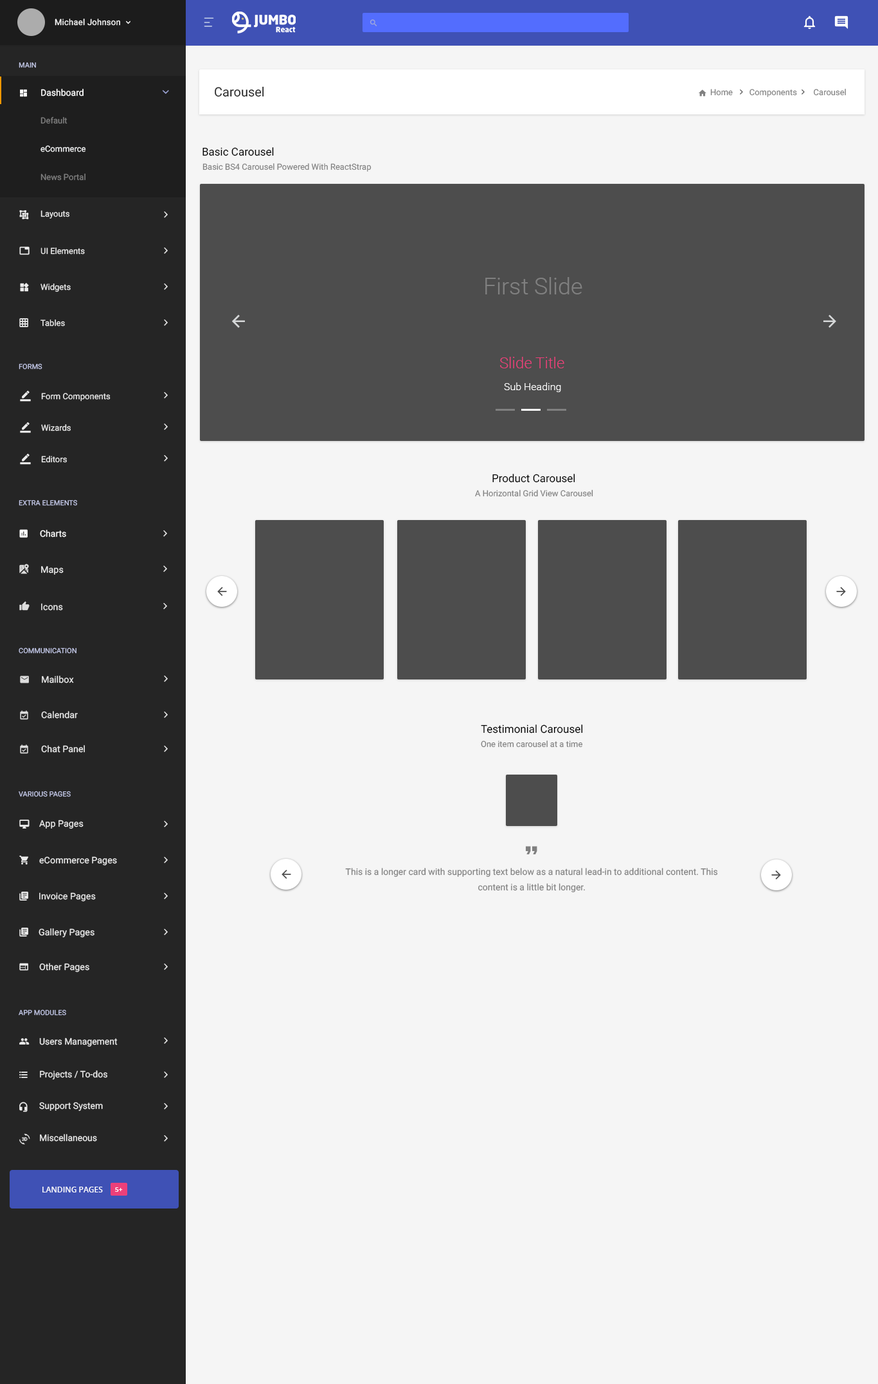
<style>
.page{position:relative;width:878px;height:1384px;background:#f5f5f5}
.page>*{position:absolute;margin:0}
.t1{font:8.4px "Roboto-Regular";letter-spacing:0.02em;color:#fafafa}
.t2{font:7.1px "Roboto-Regular";color:#c5cae9;text-transform:uppercase}
.t3{font:9px "Roboto-Regular";color:#ffffff}
.t4{font:12.9px "Roboto-Regular";color:#252525}
.t5{font:8.4px "Roboto-Regular";color:#808080}
.t6{font:8.4px/28.3px "Roboto-Regular";color:#808080}
.t7{font:8.4px/28.3px "Roboto-Regular";color:#f1f2f3}
.t8{font:10.9px "Roboto-Regular";color:#000000}
.t9{font:8.4px "Roboto-Regular";color:#ebebeb}
.t10{font:23.1px "Roboto-Light";color:#808080}
.t11{font:15.4px "Roboto-Light";color:#ec407a}
.t12{font:10.3px "Roboto-Light";color:#ffffff}
.t13{font:9px "Roboto-Regular";color:#ebebeb}
.t14{font:9px/15.4px "Roboto-Regular";color:#808080}
.t15{font:7.7px "OpenSans-SemiBold";color:#ffffff;text-transform:uppercase}
.t16{font:6.4px "OpenSans-SemiBold";color:#ffffff;text-transform:uppercase}
</style>
<div class="page">
<p class="t1" style="left:55px;top:19px;width:65px;height:7px">Michael Johnson</p>
<p class="t2" style="left:19px;top:62px;width:17px;height:6px">main</p>
<p class="t3" style="left:41px;top:89px;width:43px;height:7px">Dashboard</p>
<p class="t4" style="left:215px;top:86px;width:49px;height:11px">Carousel</p>
<p class="t5" style="left:710px;top:89px;width:136px;height:8px">Home        Components        Carousel</p>
<p class="t6" style="left:41px;top:116px;width:45px;height:65px">Default<br><span class="t7">eCommerce<br></span>News Portal</p>
<p class="t8" style="left:203px;top:147px;width:71px;height:9px">Basic Carousel</p>
<p class="t5" style="left:203px;top:163px;width:169px;height:9px">Basic BS4 Carousel Powered With ReactStrap</p>
<p class="t9" style="left:41px;top:210px;width:28px;height:9px">Layouts</p>
<p class="t9" style="left:41px;top:248px;width:44px;height:7px">UI Elements</p>
<p class="t10" style="left:485px;top:277px;width:97px;height:17px">First Slide</p>
<p class="t9" style="left:41px;top:284px;width:30px;height:8px">Widgets</p>
<p class="t9" style="left:41px;top:320px;width:24px;height:7px">Tables</p>
<p class="t2" style="left:19px;top:363px;width:23px;height:7px">forms</p>
<p class="t11" style="left:500px;top:357px;width:64px;height:11px">Slide Title</p>
<p class="t12" style="left:504px;top:383px;width:57px;height:9px">Sub Heading</p>
<p class="t9" style="left:41px;top:393px;width:70px;height:8px">Form Components</p>
<p class="t9" style="left:41px;top:424px;width:30px;height:7px">Wizards</p>
<p class="t9" style="left:41px;top:456px;width:26px;height:7px">Editors</p>
<p class="t8" style="left:492px;top:474px;width:83px;height:9px">Product Carousel</p>
<p class="t5" style="left:475px;top:490px;width:118px;height:7px">A Horizontal Grid View Carousel</p>
<p class="t2" style="left:19px;top:500px;width:58px;height:6px">extra elements</p>
<p class="t3" style="left:40px;top:530px;width:26px;height:7px">Charts</p>
<p class="t13" style="left:41px;top:566px;width:23px;height:9px">Maps</p>
<p class="t13" style="left:41px;top:603px;width:22px;height:8px">Icons</p>
<p class="t2" style="left:19px;top:647px;width:58px;height:7px">communication</p>
<p class="t13" style="left:42px;top:676px;width:32px;height:7px">Mailbox</p>
<p class="t13" style="left:41px;top:711px;width:37px;height:8px">Calendar</p>
<p class="t8" style="left:481px;top:725px;width:102px;height:9px">Testimonial Carousel</p>
<p class="t13" style="left:41px;top:745px;width:44px;height:8px">Chat Panel</p>
<p class="t5" style="left:481px;top:741px;width:102px;height:7px">One item carousel at a time</p>
<p class="t2" style="left:19px;top:791px;width:52px;height:6px">various pages</p>
<p class="t13" style="left:39px;top:820px;width:45px;height:9px">App Pages</p>
<p class="t13" style="left:39px;top:856px;width:78px;height:10px">eCommerce Pages</p>
<p class="t14" style="left:345px;top:868px;width:373px;height:25px;text-align:center">This is a longer card with supporting text below as a natural lead-in to additional content. This<br>content is a little bit longer.</p>
<p class="t13" style="left:39px;top:892px;width:57px;height:10px">Invoice Pages</p>
<p class="t13" style="left:39px;top:928px;width:56px;height:10px">Gallery Pages</p>
<p class="t13" style="left:39px;top:963px;width:50px;height:10px">Other Pages</p>
<p class="t2" style="left:19px;top:1009px;width:47px;height:7px">app modules</p>
<p class="t13" style="left:39px;top:1038px;width:79px;height:9px">Users Management</p>
<p class="t13" style="left:40px;top:1070px;width:67px;height:10px">Projects / To-dos</p>
<p class="t13" style="left:39px;top:1102px;width:64px;height:10px">Support System</p>
<p class="t13" style="left:40px;top:1134px;width:57px;height:8px">Miscellaneous</p>
<p class="t15" style="left:42px;top:1187px;width:61px;height:6px">Landing Pages</p>
<p class="t16" style="left:115px;top:1187px;width:8px;height:5px">5+</p>
</div>
